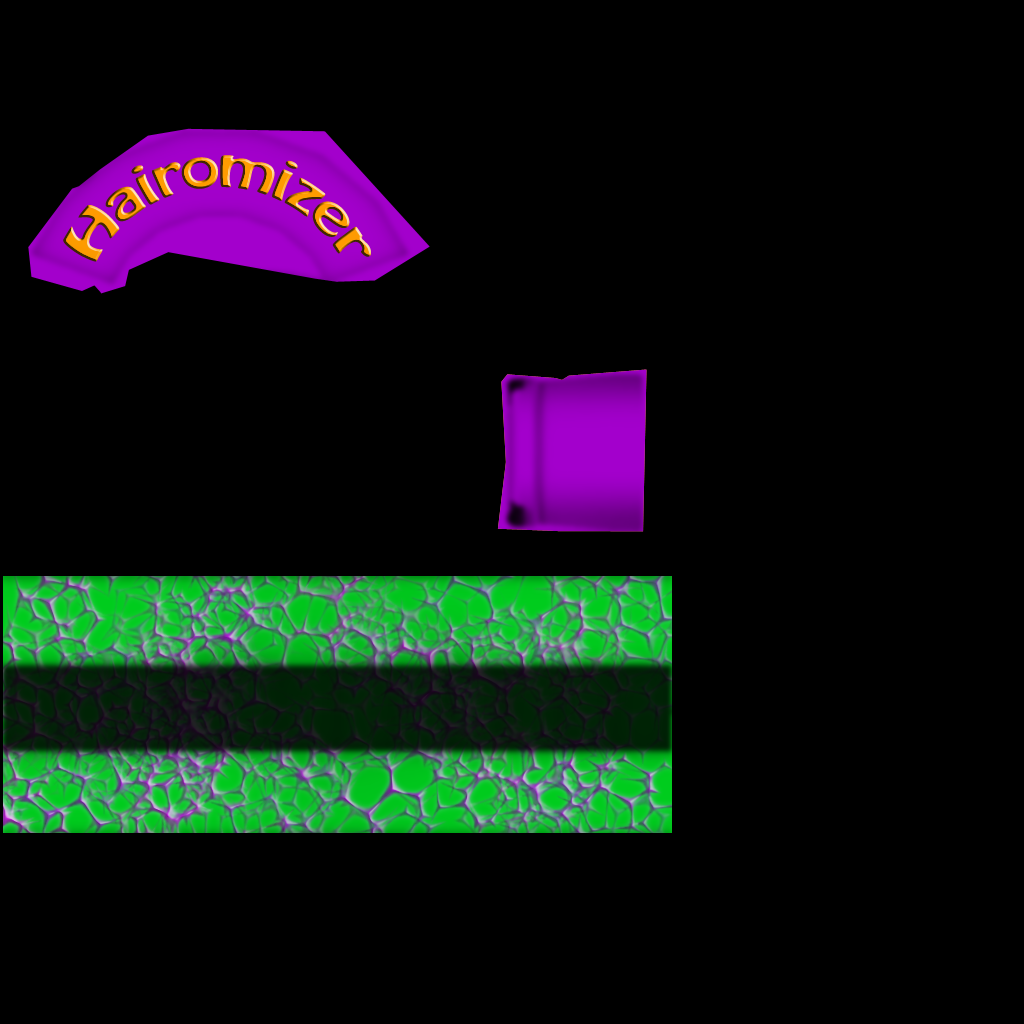
<style>
.page{position:relative;width:1024px;height:1024px;background:#000000}
.page>*{position:absolute;margin:0}
.t1{font:47.1px/78.4px "HoboStd";letter-spacing:-0.025em}
</style>
<div class="page">
<p class="t1" style="left:63px;top:155px;width:308px;height:107px">Hairomizer</p>
</div>
